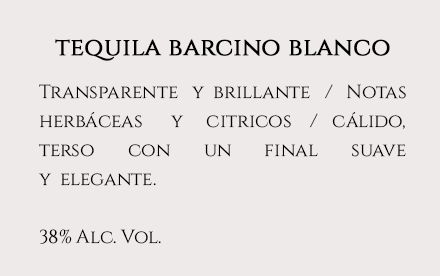
<style>
.page{position:relative;width:440px;height:276px;background:#efeaea}
.page>*{position:absolute;margin:0}
.t1{font:24.8px "Cinzel-Regular";color:#000000;font-weight:bold}
.t2{font:18.9px/29px "Cinzel-Regular";color:#000000}
</style>
<div class="page">
<p class="t1" style="left:55px;top:39px;width:335px;height:22px">tequila barcino blanco</p>
<p class="t2" style="left:38px;top:84px;width:368px;height:160px">Transparente   y  brillante   /   Notas<br>herbáceas      y     citricos    /   cálido,<br>terso       con       un       final       suave  <br>y  elegante. <br><br>38% Alc. Vol.</p>
</div>
